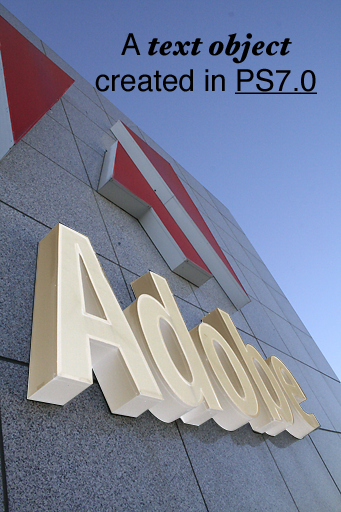
<style>
.page{position:relative;width:341px;height:512px}
.page>*{position:absolute;margin:0}
.t1{font:30px "HoeflerText-BlackItalic";color:#000000}
.t2{font:30px "Helvetica";color:#000000}
.t3{font:30px "Helvetica";color:#000000;text-decoration:underline}
</style>
<div class="page">
<p class="t1" style="left:95px;top:33px;width:222px;height:61px;text-align:center"><span class="t2">A </span>text object<br><span class="t2">created in </span><span class="t3">PS7.0</span></p>
</div>
